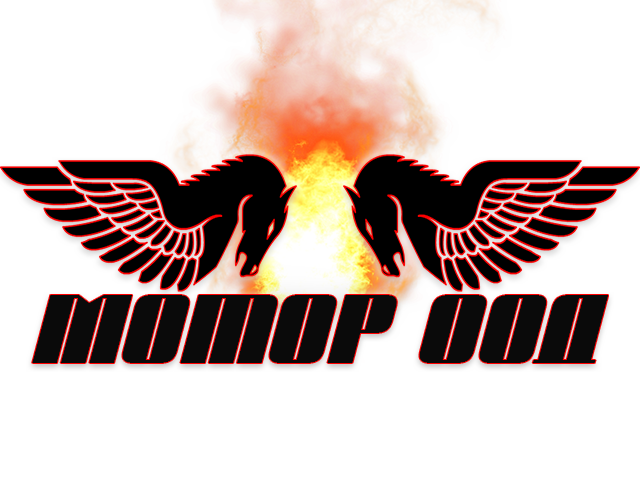
<style>
.page{position:relative;width:640px;height:480px;background:#ffffff}
.page>*{position:absolute;margin:0}
.t1{font:83.3px "AGlobusOblique";letter-spacing:-0.05em;color:#000000}
</style>
<div class="page">
<p class="t1" style="left:32px;top:295px;width:576px;height:68px">Мотор ООД</p>
</div>
